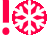
<style>
.page{position:relative;width:47px;height:35px;background:#ffffff}
.page>*{position:absolute;margin:0}
.t1{font:46.7px "Monofonto-Regular";color:#ff0048}
</style>
<div class="page">
<p class="t1" style="left:2px;top:0px;width:8px;height:35px">!</p>
</div>
